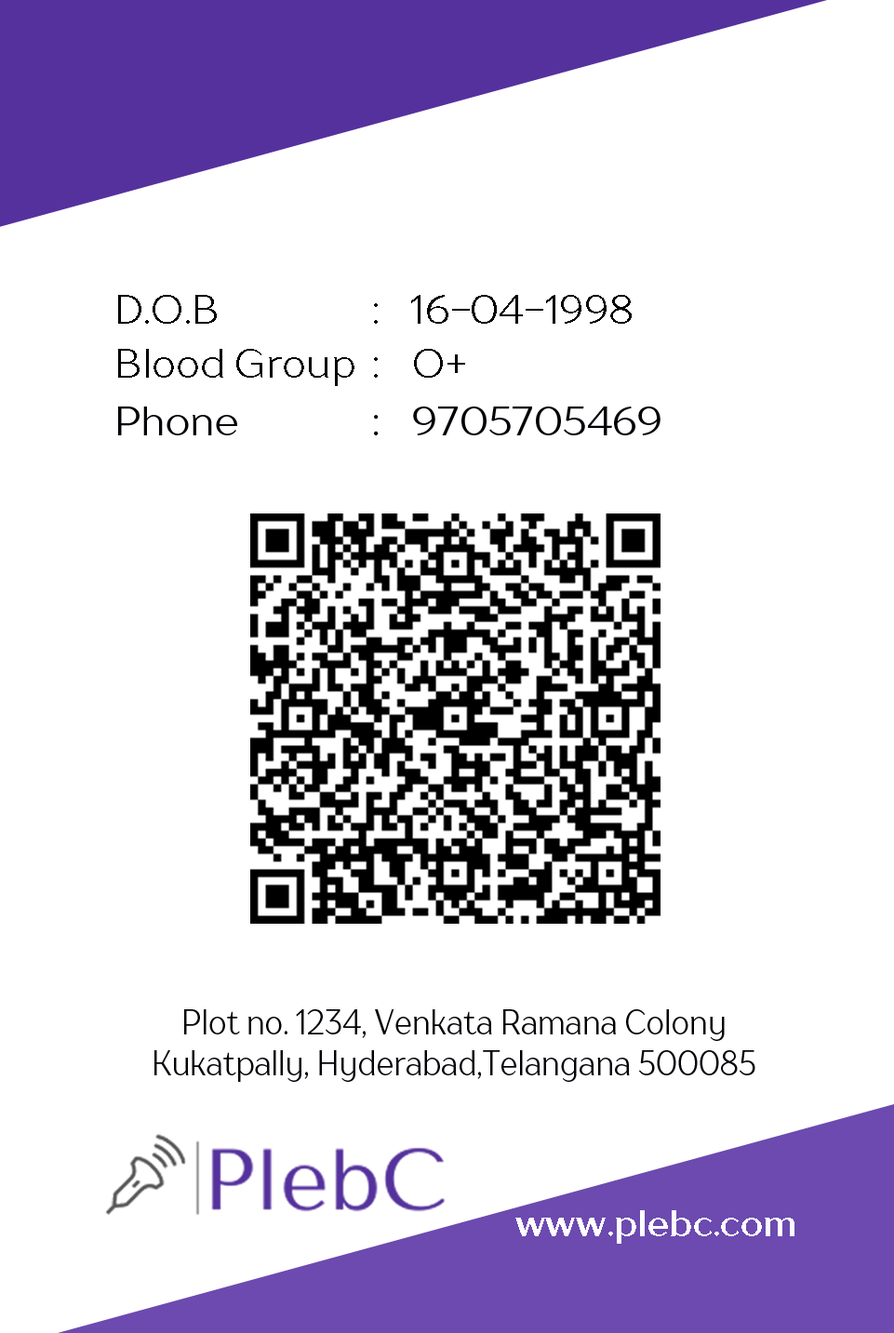
<style>
.page{position:relative;width:894px;height:1333px;background:#ffffff}
.page>*{position:absolute;margin:0}
.t1{font:40.1px "TTDrugsTrial-Regular";color:#010004}
.t2{font:40.1px "TTDrugsTrial-Regular";color:#010002}
.t3{font:40.1px "TTDrugsTrial-Regular";color:#020006}
.t4{font:34.4px "TTDrugsTrial-Regular";color:#020006;scale:0.86 1}
.t5{font:36.2px "TTDrugsTrial-Bold";color:#fefeff}
</style>
<div class="page">
<p class="t1" style="left:118px;top:295px;width:514px;height:29px">D.O.B                :   16-04-1998</p>
<p class="t2" style="left:118px;top:349px;width:347px;height:37px">Blood Group  :   O+</p>
<p class="t3" style="left:118px;top:407px;width:543px;height:28px">Phone       :   9705705469</p>
<p class="t4" style="left:154px;top:1010px;width:602px;height:72px;text-align:center">Plot no. 1234, Venkata Ramana Colony<br>Kukatpally, Hyderabad,Telangana 500085</p>
<p class="t5" style="left:516px;top:1211px;width:279px;height:33px">www.plebc.com</p>
</div>
